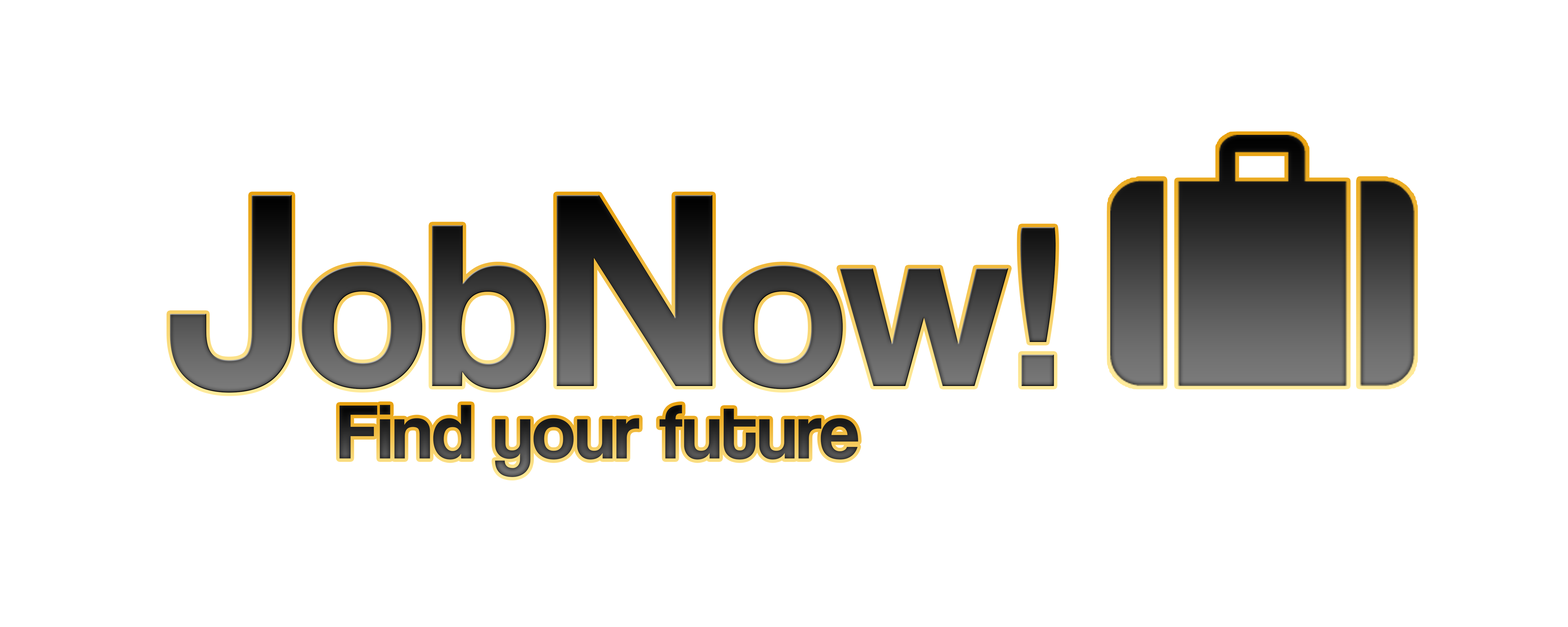
<style>
.page{position:relative;width:1568px;height:627px;background:#ffffff}
.page>*{position:absolute;margin:0}
.t1{font:239.3px "CoolveticaRg-Regular"}
.t2{font:287.6px "CoolveticaRg-Regular"}
.t3{font:79.6px "CoolveticaRg-Regular"}
</style>
<div class="page">
<p class="t1" style="left:170px;top:195px;width:886px;height:198px"><span class="t2">J</span>ob<span class="t2">N</span>ow!</p>
<p class="t3" style="left:339px;top:405px;width:519px;height:72px">Find your future</p>
</div>
